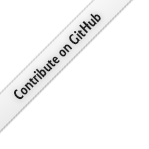
<style>
.page{position:relative;width:149px;height:149px;background:#ffffff}
.page>*{position:absolute;margin:0}
.t1{font:16px "Collegiate";color:#1f1f1f}
</style>
<div class="page">
<p class="t1" style="left:14px;top:13px;width:87px;height:87px;rotate:-45deg">Contribute on GitHub</p>
</div>
